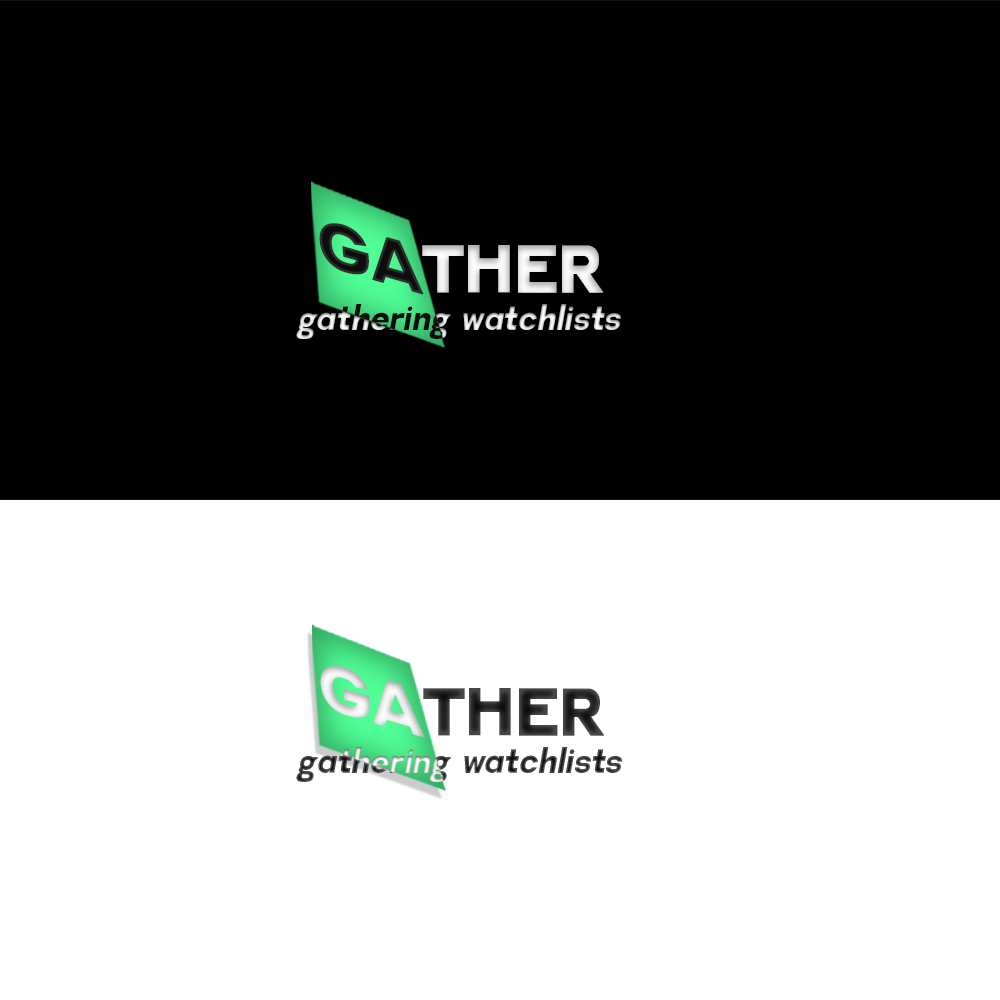
<style>
.page{position:relative;width:1000px;height:1000px;background:#000000}
.page>*{position:absolute;margin:0}
.t1{font:69.3px "Minerva-Regular";color:#0d0d0d;font-weight:bold;scale:1.04 1}
.t2{font:66.6px "Minerva-Regular";color:#e8e8e8;font-weight:bold}
.t3{font:33.3px "Minerva-Regular";font-style:italic}
.t4{font:69.3px "Minerva-Regular";color:#e7e7e7;font-weight:bold;scale:1.04 1}
.t5{font:66.6px "Minerva-Regular";font-weight:bold}
</style>
<div class="page">
<p class="t1" style="left:319px;top:223px;width:105px;height:72px;rotate:16deg">GA</p>
<p class="t2" style="left:422px;top:245px;width:181px;height:48px">THER</p>
<p class="t3" style="left:296px;top:304px;width:325px;height:35px">gathering watchlists</p>
<p class="t3" style="left:296px;top:304px;width:325px;height:35px">gathering watchlists</p>
<p class="t4" style="left:320px;top:666px;width:105px;height:72px;rotate:16deg">GA</p>
<p class="t5" style="left:423px;top:688px;width:181px;height:48px">THER</p>
<p class="t3" style="left:296px;top:747px;width:326px;height:35px">gathering watchlists</p>
<p class="t3" style="left:296px;top:747px;width:326px;height:35px">gathering watchlists</p>
</div>
